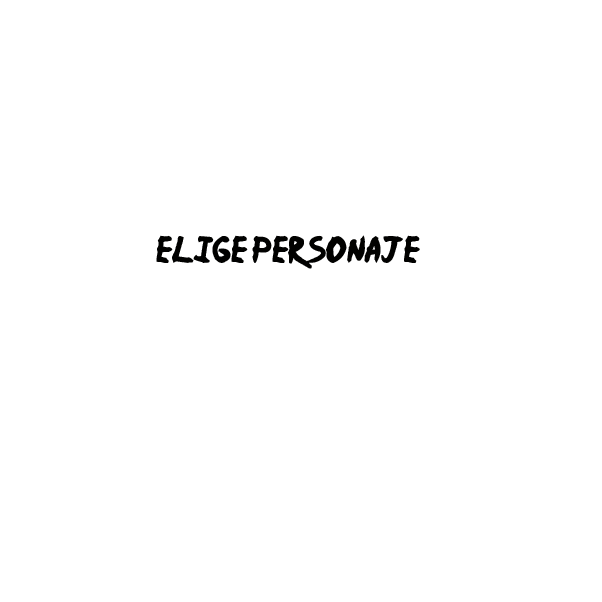
<style>
.page{position:relative;width:602px;height:602px;background:#ffffff}
.page>*{position:absolute;margin:0}
.t1{font:30px "Ninja-Naruto";color:#010100}
</style>
<div class="page">
<p class="t1" style="left:156px;top:235px;width:264px;height:34px">ELIGE PERSONAJE</p>
</div>
